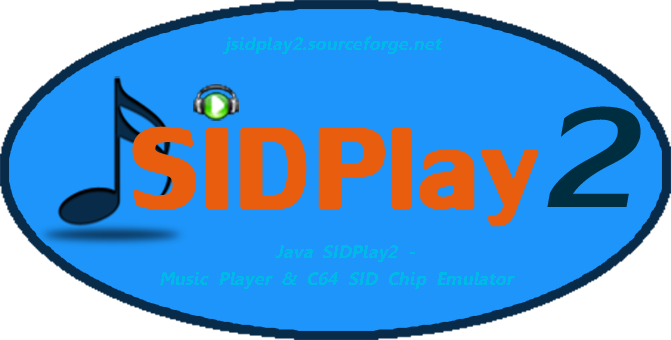
<style>
.page{position:relative;width:671px;height:340px;background:#1d95fa}
.page>*{position:absolute;margin:0}
.t1{font:18px "Leelawadee-Bold";color:#00b9e9;font-style:italic}
.t2{font:165.6px "LilyUPC";color:#e95d0f;font-weight:bold}
.t3{font:212.9px "LilyUPC";color:#002e41;font-style:italic}
</style>
<div class="page">
<p class="t1" style="left:223px;top:36px;width:219px;height:18px">jsidplay2.sourceforge.net</p>
<p class="t2" style="left:132px;top:106px;width:509px;height:121px">S I D  P l a y<span class="t3">2</span></p>
<p class="t1" style="left:275px;top:245px;width:140px;height:17px">Java SIDPlay2 -</p>
<p class="t1" style="left:160px;top:272px;width:355px;height:17px">Music Player &amp; C64 SID Chip Emulator</p>
</div>
